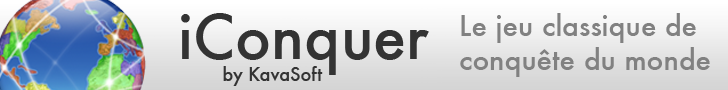
<style>
.page{position:relative;width:728px;height:90px}
.page>*{position:absolute;margin:0}
.t1{font:18px "Futura-Medium";color:#333333}
.t2{font:60px "Futura-Medium";color:#333333}
.t3{font:28px "Futura-Medium";color:#818181}
</style>
<div class="page">
<p class="t1" style="left:181px;top:13px;width:248px;height:73px"><span class="t2">iConquer<br></span>        by KavaSoft</p>
<p class="t3" style="left:460px;top:13px;width:250px;height:64px">Le jeu classique de <br>conquête du monde</p>
</div>
